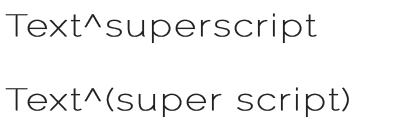
<style>
.page{position:relative;width:400px;height:130px;background:#ffffff}
.page>*{position:absolute;margin:0}
.t1{font:30.7px "Raleway-Thin";letter-spacing:0.05em;color:#222222;font-weight:bold;scale:1.2 1}
</style>
<div class="page">
<p class="t1" style="left:5px;top:13px;width:344px;height:105px">Text^superscript<br><br>Text^(super script)</p>
</div>
